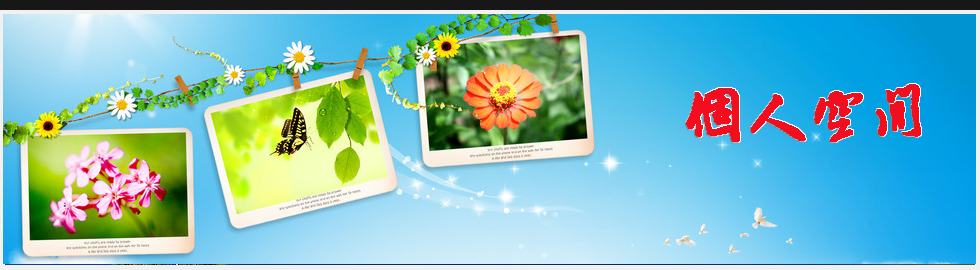
<style>
.page{position:relative;width:980px;height:270px}
.page>*{position:absolute;margin:0}
.t1{font:60px "ÊéÌå·»Ã×ÜÀÌå";color:#f20d1f;font-weight:bold}
</style>
<div class="page">
<p class="t1" style="left:686px;top:84px;width:235px;height:58px">个人空间</p>
</div>
